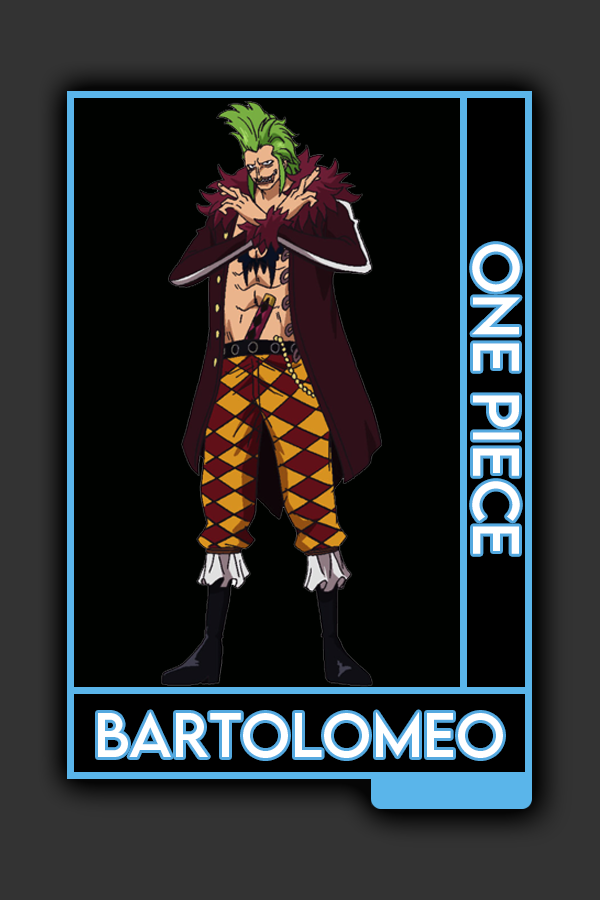
<style>
.page{position:relative;width:600px;height:900px;background:#000200}
.page>*{position:absolute;margin:0}
.t1{font:58.4px "LEMONMILK-Regular";color:#ffffff}
.t2{font:55.4px "LEMONMILK-Regular";color:#ffffff}
</style>
<div class="page">
<p class="t1" style="left:472px;top:244px;width:48px;height:310px;rotate:90deg">One Piece</p>
<p class="t2" style="left:98px;top:712px;width:405px;height:46px">Bartolomeo</p>
</div>
